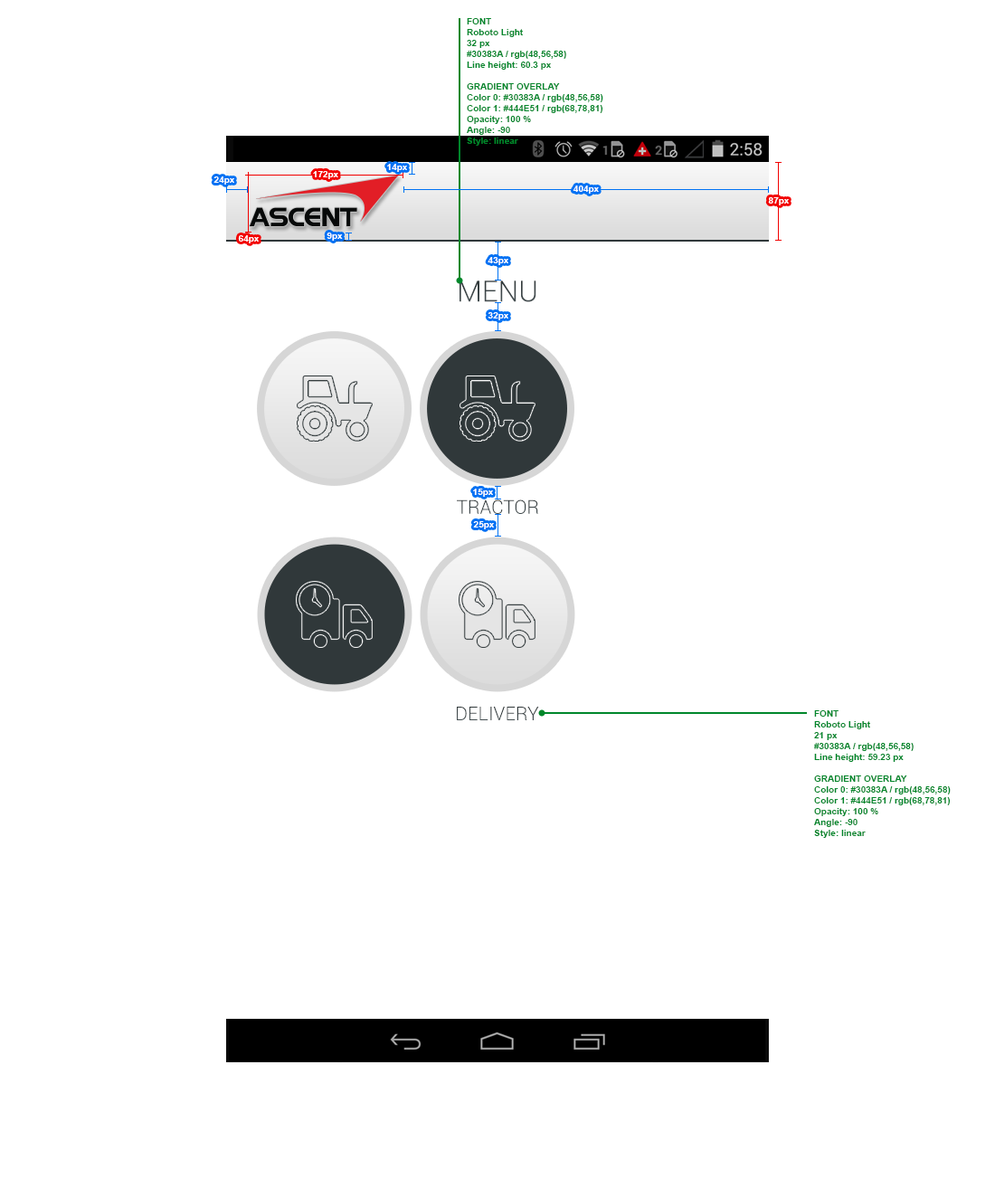
<style>
.page{position:relative;width:995px;height:1198px;background:#ffffff}
.page>*{position:absolute;margin:0}
.t1{font:9px "Arial-BoldMT";color:#00872b}
.t2{font:9px "Arial-BoldMT";color:#ffffff}
.t3{font:29px "Roboto-Light";color:#30383a}
.t4{font:19px "Roboto-Light";color:#30383a}
</style>
<div class="page">
<p class="t1" style="left:467px;top:18px;width:137px;height:128px">FONT <br>Roboto Light<br>32 px<br>#30383A / rgb(48,56,58)<br>Line height: 60.3 px<br><br>GRADIENT OVERLAY<br>Color 0: #30383A / rgb(48,56,58)<br>Color 1: #444E51 / rgb(68,78,81)<br>Opacity: 100 %<br>Angle: -90<br>Style: linear</p>
<p class="t2" style="left:313px;top:171px;width:25px;height:8px">172px</p>
<p class="t2" style="left:387px;top:164px;width:20px;height:8px">14px</p>
<p class="t2" style="left:214px;top:176px;width:20px;height:9px">24px</p>
<p class="t2" style="left:573px;top:185px;width:26px;height:9px">404px</p>
<p class="t2" style="left:768px;top:197px;width:21px;height:8px">87px</p>
<p class="t2" style="left:327px;top:233px;width:16px;height:8px">9px</p>
<p class="t2" style="left:238px;top:235px;width:21px;height:8px">64px</p>
<p class="t2" style="left:488px;top:257px;width:21px;height:8px">43px</p>
<p class="t3" style="left:460px;top:281px;width:77px;height:21px">MENU</p>
<p class="t2" style="left:488px;top:312px;width:21px;height:8px">32px</p>
<p class="t2" style="left:473px;top:489px;width:20px;height:8px">15px</p>
<p class="t4" style="left:457px;top:499px;width:81px;height:15px">TRACTOR</p>
<p class="t2" style="left:473px;top:521px;width:21px;height:8px">25px</p>
<p class="t4" style="left:457px;top:707px;width:82px;height:13px">DELIVERY</p>
<p class="t1" style="left:814px;top:710px;width:137px;height:128px">FONT <br>Roboto Light<br>21 px<br>#30383A / rgb(48,56,58)<br>Line height: 59.23 px<br><br>GRADIENT OVERLAY<br>Color 0: #30383A / rgb(48,56,58)<br>Color 1: #444E51 / rgb(68,78,81)<br>Opacity: 100 %<br>Angle: -90<br>Style: linear</p>
</div>
